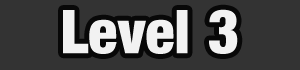
<style>
.page{position:relative;width:300px;height:70px;background:#333333}
.page>*{position:absolute;margin:0}
.t1{font:60px "Harvest";color:#f2f2f2}
</style>
<div class="page">
<p class="t1" style="left:63px;top:9px;width:175px;height:45px">Level 3</p>
</div>
